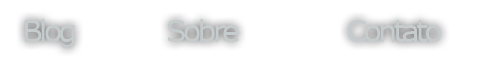
<style>
.page{position:relative;width:483px;height:69px;background:#ffffff}
.page>*{position:absolute;margin:0}
.t1{font:30px "Verdana";letter-spacing:-0.12em;color:#c6cccd}
</style>
<div class="page">
<p class="t1" style="left:24px;top:19px;width:418px;height:29px">Blog     Sobre     Contato</p>
</div>
